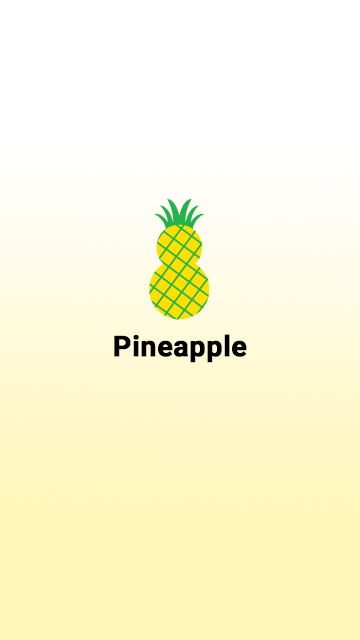
<style>
.page{position:relative;width:360px;height:640px;background:#ffffff}
.page>*{position:absolute;margin:0}
.t1{font:28.5px "Roboto-Bold";color:#000000;font-weight:bold}
</style>
<div class="page">
<p class="t1" style="left:114px;top:334px;width:133px;height:29px">Pineapple</p>
</div>
